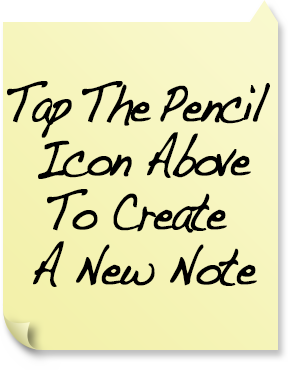
<style>
.page{position:relative;width:288px;height:370px}
.page>*{position:absolute;margin:0}
.t1{font:54.3px "Handwriting-Dakota";letter-spacing:-0.065em;color:#faf9ce;font-weight:bold;scale:0.74 1}
</style>
<div class="page">
<p class="t1" style="left:7px;top:81px;width:263px;height:206px;text-align:center">Tap The Pencil <br>Icon Above<br>To Create <br>A New Note</p>
</div>
